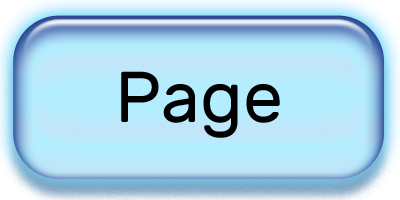
<style>
.page{position:relative;width:400px;height:200px}
.page>*{position:absolute;margin:0}
.t1{font:71.7px "Contemporary-Regular";color:#000000}
</style>
<div class="page">
<p class="t1" style="left:121px;top:71px;width:159px;height:67px">Page</p>
</div>
